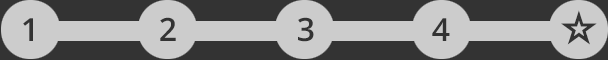
<style>
.page{position:relative;width:608px;height:60px;background:#cccccc}
.page>*{position:absolute;margin:0}
.t1{font:32px "OpenSans-Semibold";color:#333333}
</style>
<div class="page">
<p class="t1" style="left:160px;top:17px;width:16px;height:24px">2</p>
<p class="t1" style="left:298px;top:17px;width:16px;height:25px">3</p>
<p class="t1" style="left:23px;top:18px;width:10px;height:23px">1</p>
<p class="t1" style="left:432px;top:18px;width:18px;height:23px">4</p>
</div>
